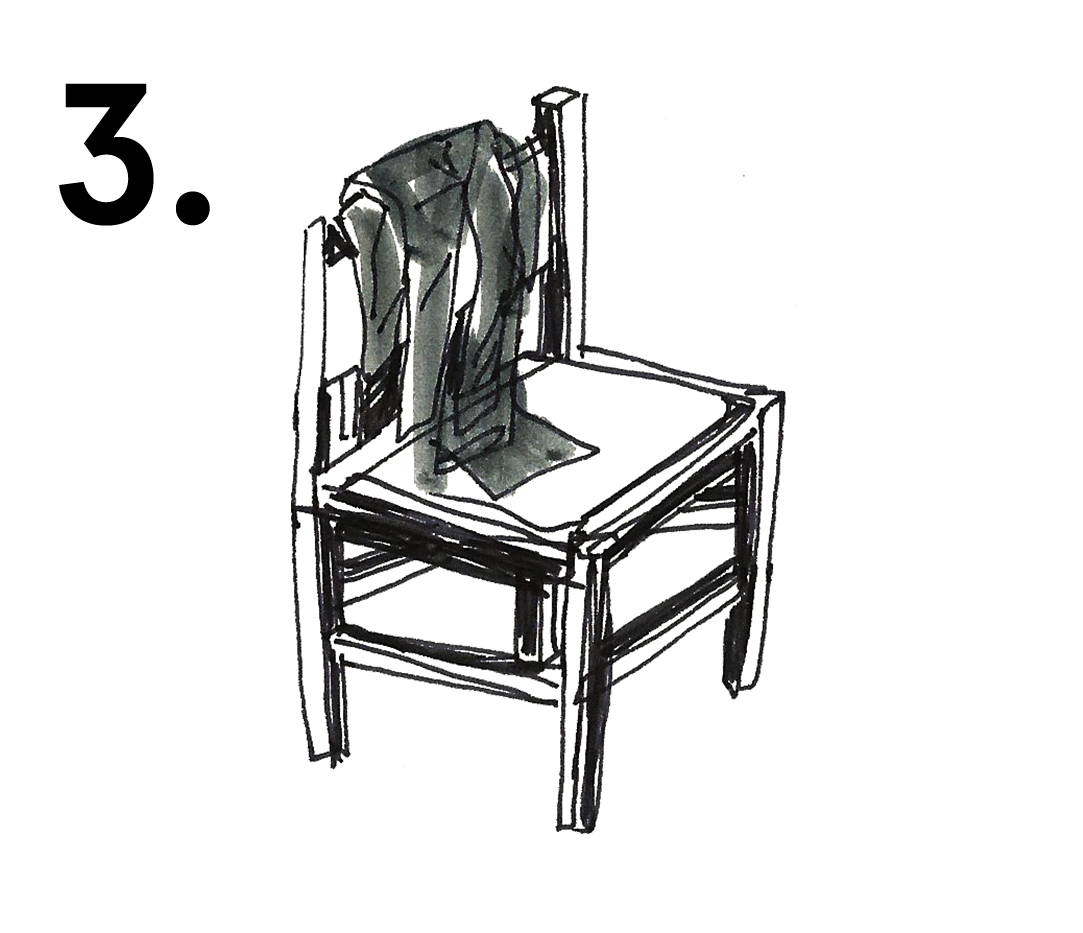
<style>
.page{position:relative;width:1083px;height:933px;background:#ffffff}
.page>*{position:absolute;margin:0}
.t1{font:200px "Apercu-Bold";color:#000000}
</style>
<div class="page">
<p class="t1" style="left:59px;top:83px;width:151px;height:143px">3.</p>
</div>
